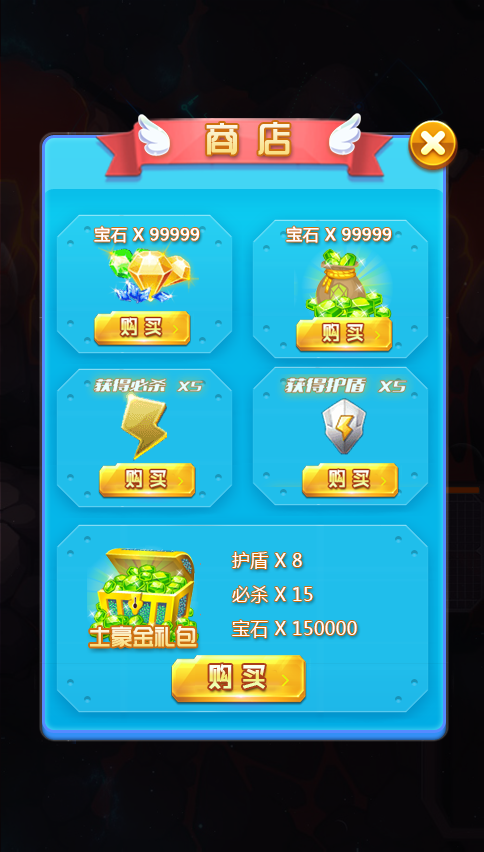
<style>
.page{position:relative;width:484px;height:852px}
.page>*{position:absolute;margin:0}
.t1{font:38px "TRENDS";font-weight:bold;scale:0.88 1}
.t2{font:16px "MicrosoftYaHei";letter-spacing:0.02em;color:#ffffff;font-weight:bold}
.t3{font:18px "MicrosoftYaHei";letter-spacing:0.02em;color:#ffffff}
</style>
<div class="page">
<p class="t1" style="left:206px;top:122px;width:84px;height:33px">商 店</p>
<p class="t2" style="left:94px;top:226px;width:106px;height:17px">宝石 X 99999</p>
<p class="t2" style="left:286px;top:226px;width:106px;height:17px">宝石 X 99999</p>
<p class="t3" style="left:232px;top:552px;width:70px;height:17px">护盾 X 8</p>
<p class="t3" style="left:232px;top:586px;width:81px;height:17px">必杀 X 15</p>
<p class="t3" style="left:232px;top:620px;width:125px;height:18px">宝石 X 150000</p>
</div>
